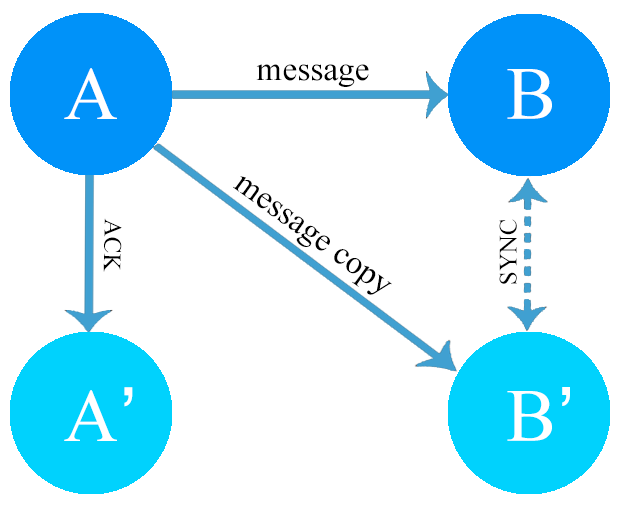
<style>
.page{position:relative;width:622px;height:509px;background:#ffffff}
.page>*{position:absolute;margin:0}
.t1{font:33.3px "TimesNewRomanPSMT";color:#000000}
.t2{font:75px "TimesNewRomanPSMT";color:#ffffff}
.t3{font:25px "TimesNewRomanPSMT";color:#000000}
.t4{font:75px "Helvetica";color:#ffffff}
</style>
<div class="page">
<p class="t1" style="left:256px;top:64px;width:113px;height:23px">message</p>
<p class="t2" style="left:64px;top:68px;width:53px;height:51px">A</p>
<p class="t2" style="left:507px;top:69px;width:45px;height:50px">B</p>
<p class="t1" style="left:233px;top:176px;width:159px;height:119px;rotate:36deg">message copy</p>
<p class="t3" style="left:103px;top:218px;width:19px;height:54px;rotate:91deg">ACK</p>
<p class="t3" style="left:499px;top:219px;width:18px;height:65px;rotate:-90deg">SYNC</p>
<p class="t2" style="left:64px;top:387px;width:69px;height:54px">A<span class="t4">’</span></p>
<p class="t2" style="left:507px;top:387px;width:63px;height:54px">B<span class="t4">’</span></p>
</div>
